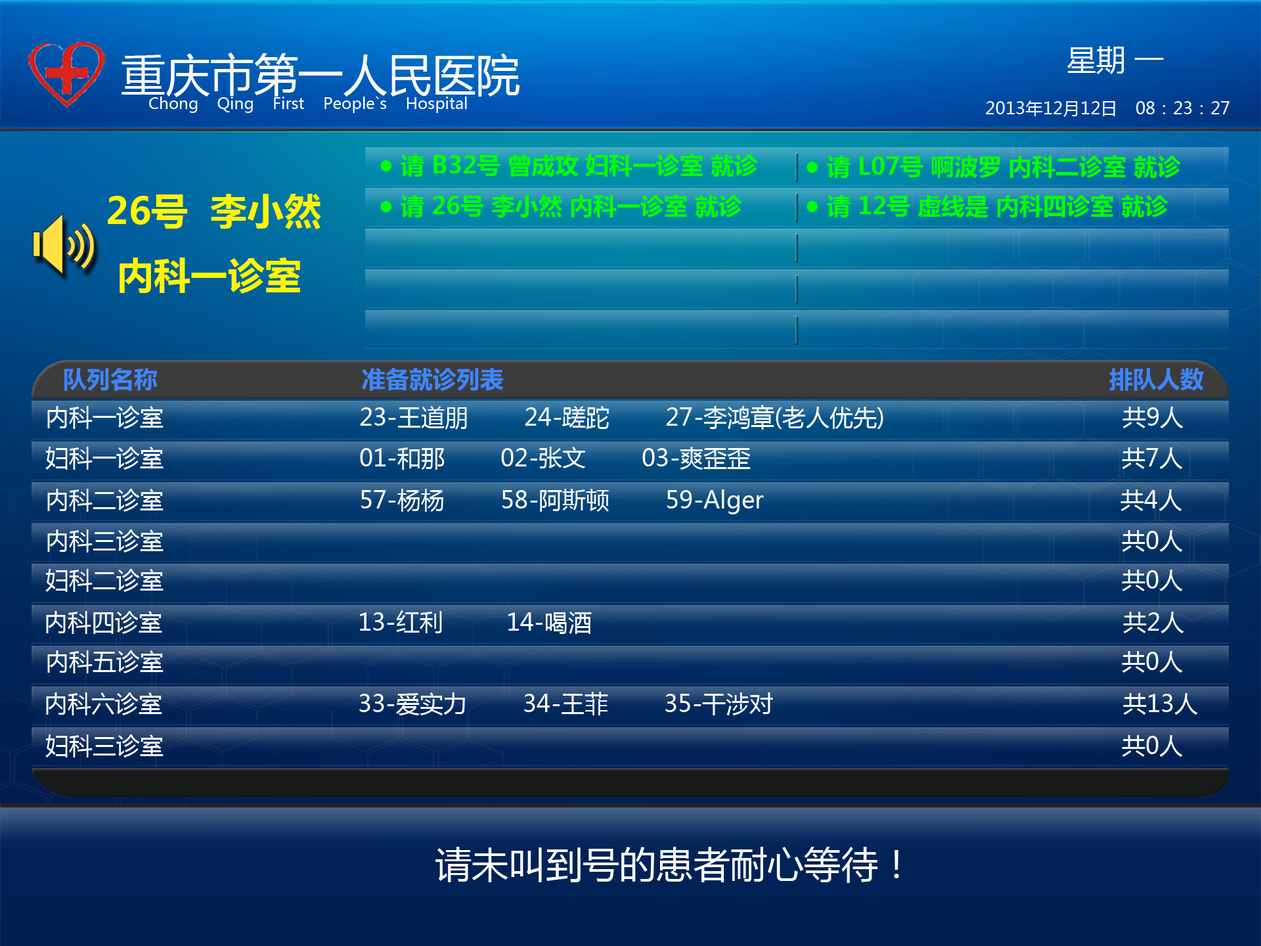
<style>
.page{position:relative;width:1261px;height:946px}
.page>*{position:absolute;margin:0}
.t1{font:44.3px "MicrosoftYaHei";color:#ffffff}
.t2{font:29.6px "MicrosoftYaHei";color:#ffffff}
.t3{font:15.8px "MicrosoftYaHei";color:#ffffff}
.t4{font:17.2px "MicrosoftYaHei";color:#ffffff}
.t5{font:23.6px "MicrosoftYaHei-Bold";color:#02ff08}
.t6{font:36.9px "MicrosoftYaHei-Bold";color:#fff600}
.t7{font:23.6px "MicrosoftYaHei-Bold";color:#3e86fe}
.t8{font:23.6px "MicrosoftYaHei";color:#ffffff}
.t9{font:36.9px "MicrosoftYaHei";color:#ffffff}
</style>
<div class="page">
<p class="t1" style="left:121px;top:53px;width:399px;height:44px">重庆市第一人民医院</p>
<p class="t2" style="left:1067px;top:46px;width:97px;height:28px">星期 一</p>
<p class="t3" style="left:149px;top:97px;width:318px;height:16px">Chong    Qing    First    People`s    Hospital</p>
<p class="t4" style="left:986px;top:100px;width:129px;height:17px">2013年12月12日</p>
<p class="t4" style="left:1136px;top:101px;width:93px;height:13px">08：23：27</p>
<p class="t5" style="left:380px;top:154px;width:378px;height:23px">● 请 B32号 曾成攻 妇科一诊室 就诊</p>
<p class="t5" style="left:806px;top:155px;width:375px;height:23px">● 请 L07号 啊波罗 内科二诊室 就诊</p>
<p class="t6" style="left:108px;top:194px;width:213px;height:100px">26号  李小然<br> 内科一诊室</p>
<p class="t5" style="left:380px;top:194px;width:362px;height:23px">● 请 26号 李小然 内科一诊室 就诊</p>
<p class="t5" style="left:806px;top:194px;width:362px;height:23px">● 请 12号 虚线是 内科四诊室 就诊</p>
<p class="t7" style="left:64px;top:367px;width:1140px;height:24px">队列名称                             准备就诊列表                                                                                      排队人数</p>
<p class="t8" style="left:47px;top:405px;width:1136px;height:24px">内科一诊室                            23-王道朋        24-蹉跎        27-李鸿章(老人优先)                                  共9人</p>
<p class="t8" style="left:45px;top:447px;width:1138px;height:23px">妇科一诊室                            01-和那        02-张文        03-爽歪歪                                                     共7人</p>
<p class="t8" style="left:47px;top:489px;width:1135px;height:25px">内科二诊室                            57-杨杨        58-阿斯顿        59-Alger                                                   共4人</p>
<p class="t8" style="left:47px;top:529px;width:1136px;height:23px">内科三诊室                                                                                                                                         共0人</p>
<p class="t8" style="left:45px;top:569px;width:1138px;height:23px">妇科二诊室                                                                                                                                         共0人</p>
<p class="t8" style="left:46px;top:610px;width:1138px;height:24px">内科四诊室                            13-红利         14-喝酒                                                                            共2人</p>
<p class="t8" style="left:47px;top:650px;width:1136px;height:23px">内科五诊室                                                                                                                                         共0人</p>
<p class="t8" style="left:46px;top:692px;width:1152px;height:23px">内科六诊室                            33-爱实力        34-王菲        35-干涉对                                                  共13人</p>
<p class="t8" style="left:45px;top:734px;width:1138px;height:23px">妇科三诊室                                                                                                                                         共0人</p>
<p class="t9" style="left:435px;top:847px;width:464px;height:36px">请未叫到号的患者耐心等待！</p>
</div>
